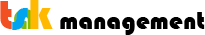
<style>
.page{position:relative;width:205px;height:35px;background:#ffffff}
.page>*{position:absolute;margin:0}
.t1{font:41.6px "Bauhaus93"}
.t2{font:44.3px "Bauhaus93";color:#00a4ef}
.t3{font:44.3px "Bauhaus93";color:#ffb900}
.t4{font:25.1px "Bauhaus93";color:#000000}
</style>
<div class="page">
<p class="t1" style="left:0px;top:1px;width:36px;height:29px">ta</p>
<p class="t2" style="left:12px;top:0px;width:41px;height:30px">s<span class="t3">k</span></p>
<p class="t4" style="left:60px;top:12px;width:145px;height:23px">management</p>
</div>
